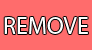
<style>
.page{position:relative;width:92px;height:50px;background:#ff6c6c}
.page>*{position:absolute;margin:0}
.t1{font:24px "MyriadPro-Regular";color:#ffffff}
</style>
<div class="page">
<p class="t1" style="left:4px;top:17px;width:84px;height:17px">REMOVE</p>
</div>
